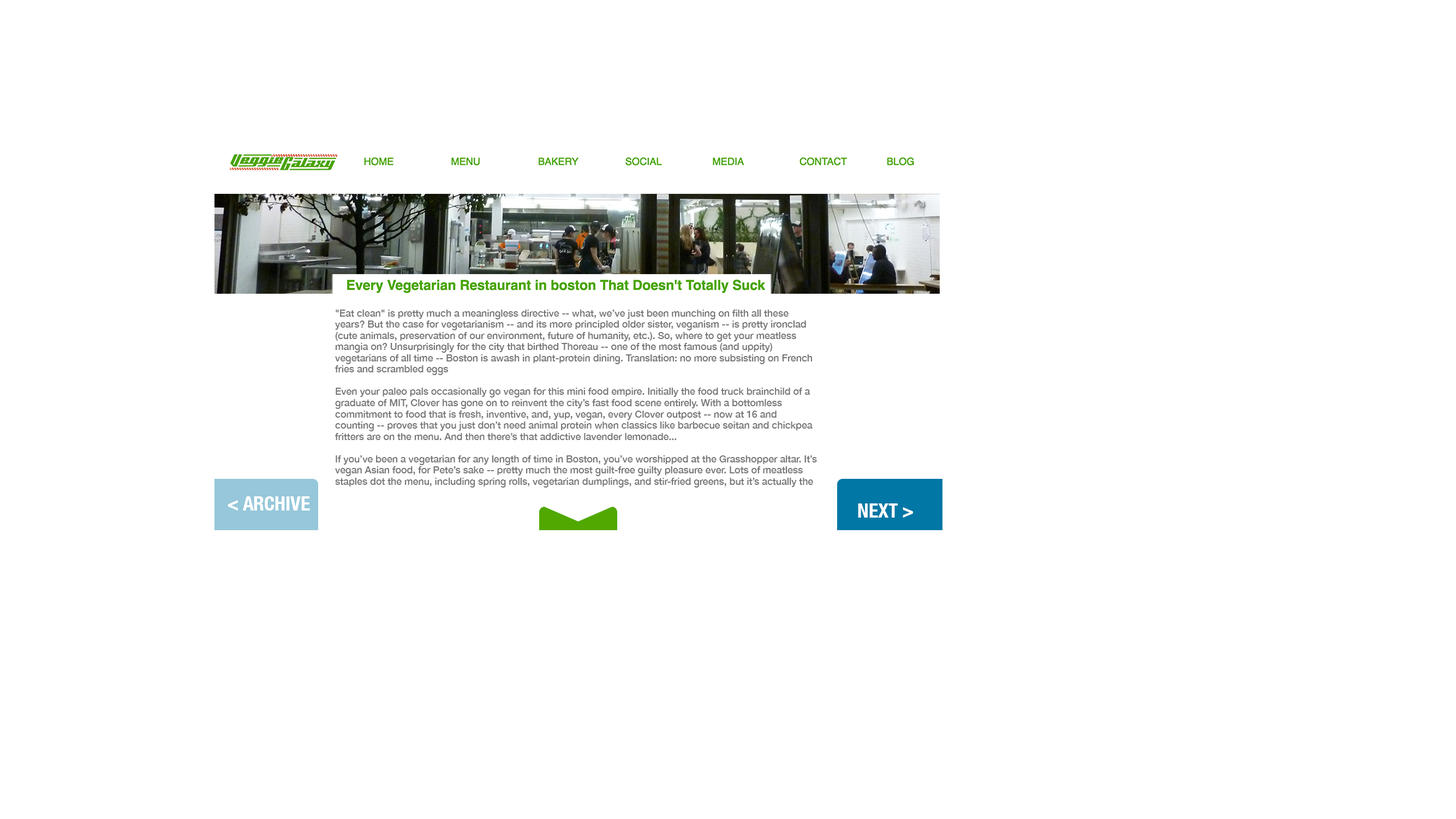
<style>
.page{position:relative;width:1456px;height:819px;background:#ffffff}
.page>*{position:absolute;margin:0}
.t1{font:9.6px/11.2px "HelveticaNeue-Medium";letter-spacing:-0.007em;color:#797878}
.t2{font:9.6px/11.2px "HelveticaNeue-CondensedBold";letter-spacing:-0.007em;color:#000000}
.t3{font:19.7px "HelveticaNeue-CondensedBold";letter-spacing:-0.007em;color:#ffffff}
</style>
<div class="page">
<p class="t1" style="left:335px;top:310px;width:482px;height:177px">"Eat clean" is pretty much a meaningless directive -- what, we’ve just been munching on filth all these years? But the case for vegetarianism -- and its more principled older sister, veganism -- is pretty ironclad (cute animals, preservation of our environment, future of humanity, etc.). So, where to get your meatless mangia on? Unsurprisingly for the city that birthed Thoreau -- one of the most famous (and uppity) vegetarians of all time -- Boston is awash in plant-protein dining. Translation: no more subsisting on French fries and scrambled eggs<br><br>Even your paleo pals occasionally go vegan for this mini food empire. Initially the food truck brainchild of a graduate of MIT, Clover has gone on to reinvent the city’s fast food scene entirely. With a bottomless commitment to food that is fresh, inventive, and, yup, vegan, every Clover outpost -- now at 16 and counting -- proves that you just don’t need animal protein when classics like barbecue seitan and chickpea fritters are on the menu. And then there’s that addictive lavender lemonade...<br><br>If you’ve been a vegetarian for any length of time in Boston, you’ve worshipped at the Grasshopper altar. It’s vegan Asian food, for Pete’s sake -- pretty much the most guilt-free guilty pleasure ever. Lots of meatless staples dot the menu, including spring rolls, vegetarian dumplings, and stir-fried greens, but it’s actually the tofu and seitan dishes that give you that true Chinese food fix. Do you still dream of the stir-fried spicy garlic beef dish from your takeout-filled youth? It’s yours for the <span class="t2">taking, now in a healthier form.</span></p>
<p class="t3" style="left:228px;top:496px;width:82px;height:14px">&lt; ARCHIVE</p>
<p class="t3" style="left:858px;top:503px;width:55px;height:14px">NEXT &gt;</p>
</div>
